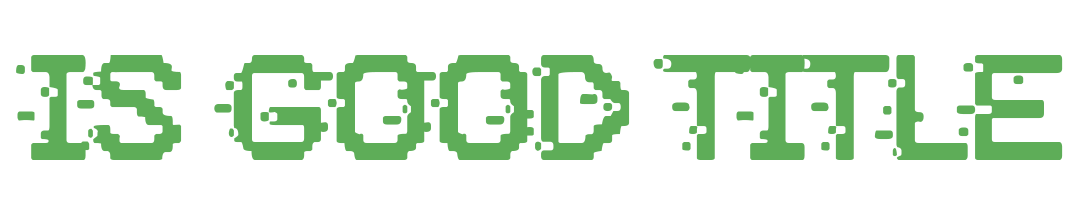
<style>
.page{position:relative;width:1078px;height:221px;background:#ffffff}
.page>*{position:absolute;margin:0}
.t1{font:150px "PositiveSystem";color:#5ead58}
</style>
<div class="page">
<p class="t1" style="left:16px;top:54px;width:1047px;height:106px">is good title</p>
</div>
